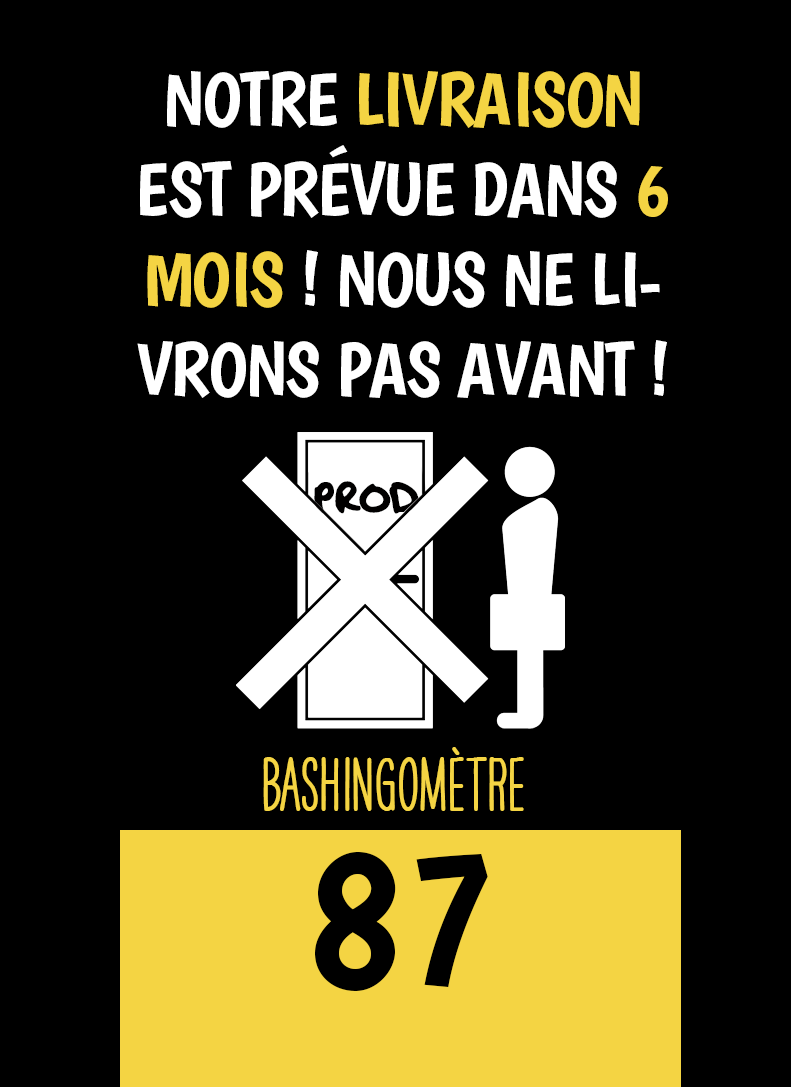
<style>
.page{position:relative;width:791px;height:1087px;background:#000000}
.page>*{position:absolute;margin:0}
.t1{font:75px "Boogaloo-Regular";letter-spacing:-0.02em;color:#ffffff}
.t2{font:75px "Boogaloo-Regular";letter-spacing:-0.02em;color:#f4d443}
.t3{font:50px "OakStreetW01-Regular";letter-spacing:-0.02em;color:#010000}
.t4{font:66.7px "HAVEANICEDAYTallW04-Bold";color:#f4d443}
.t5{font:200px "Boogaloo-Regular";color:#000000}
</style>
<div class="page">
<p class="t1" style="left:137px;top:71px;width:531px;height:327px;text-align:center">NOTRE <span class="t2">LIVRAISON </span>EST PRÉVUE DANS <span class="t2">6 MOIS</span> ! NOUS NE LIVRONS PAS AVANT !</p>
<p class="t3" style="left:314px;top:481px;width:105px;height:33px">PROD</p>
<p class="t4" style="left:263px;top:747px;width:261px;height:64px">BASHINgomètre</p>
<p class="t5" style="left:315px;top:852px;width:173px;height:139px">87</p>
</div>
